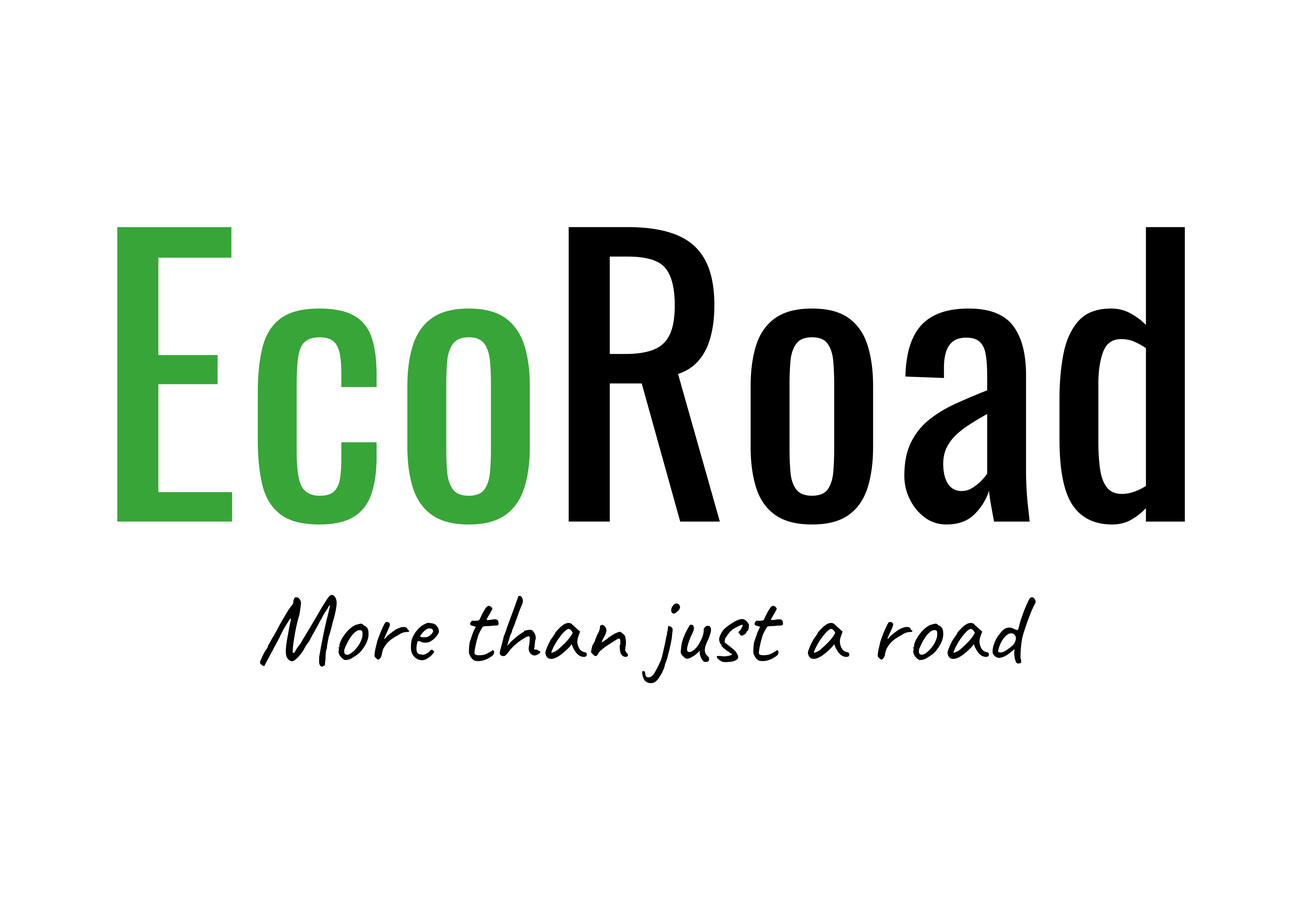
<style>
.page{position:relative;width:1299px;height:918px;background:#ffffff}
.page>*{position:absolute;margin:0}
.t1{font:363.4px "Oswald-Regular";color:#000000}
.t2{font:363.4px "Oswald-Regular";color:#38a538}
.t3{font:100.3px "Caveat-Regular";color:#000000}
</style>
<div class="page">
<p class="t1" style="left:117px;top:227px;width:1068px;height:298px"><span class="t2">Eco</span>Road</p>
<p class="t3" style="left:260px;top:595px;width:776px;height:88px">More than just a road</p>
</div>
